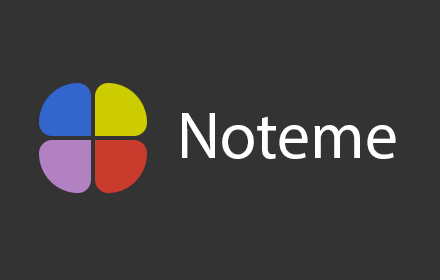
<style>
.page{position:relative;width:440px;height:280px;background:#333333}
.page>*{position:absolute;margin:0}
.t1{font:66.7px "MyriadPro-Regular";color:#ffffff}
</style>
<div class="page">
<p class="t1" style="left:182px;top:113px;width:214px;height:46px">Noteme</p>
</div>
